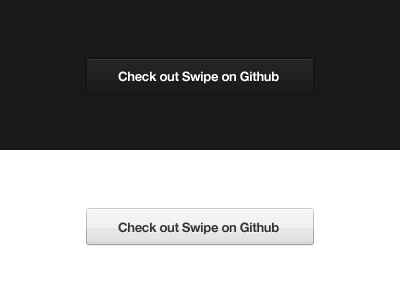
<style>
.page{position:relative;width:400px;height:300px;background:#ffffff}
.page>*{position:absolute;margin:0}
.t1{font:13px "HelveticaNeue-Bold";letter-spacing:-0.025em;color:#ffffff}
.t2{font:13px "HelveticaNeue-Bold";letter-spacing:-0.025em;color:#353535}
</style>
<div class="page">
<p class="t1" style="left:118px;top:71px;width:161px;height:13px">Check out Swipe on Github</p>
<p class="t2" style="left:118px;top:222px;width:161px;height:13px">Check out Swipe on Github</p>
</div>
